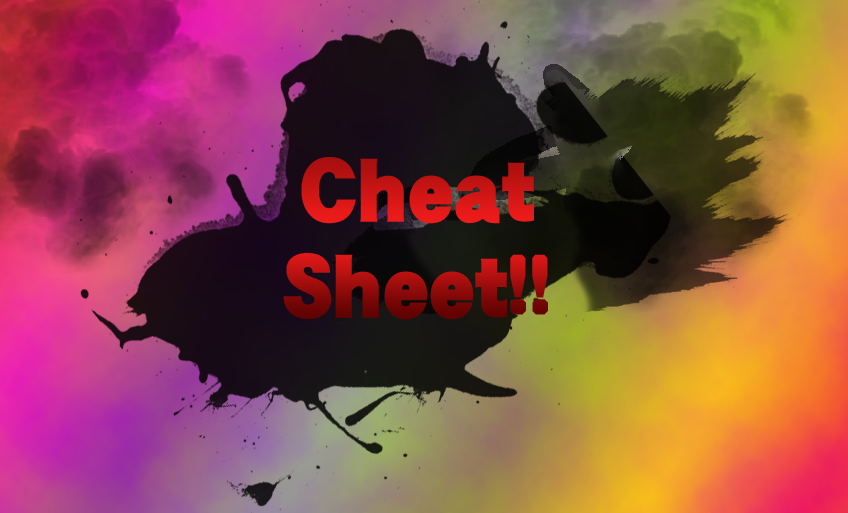
<style>
.page{position:relative;width:848px;height:513px}
.page>*{position:absolute;margin:0}
.t1{font:80px "DFGothic-SU-WING-RKSJ-H"}
</style>
<div class="page">
<p class="t1" style="left:283px;top:157px;width:265px;height:163px;text-align:center">Cheat Sheet!!</p>
</div>
